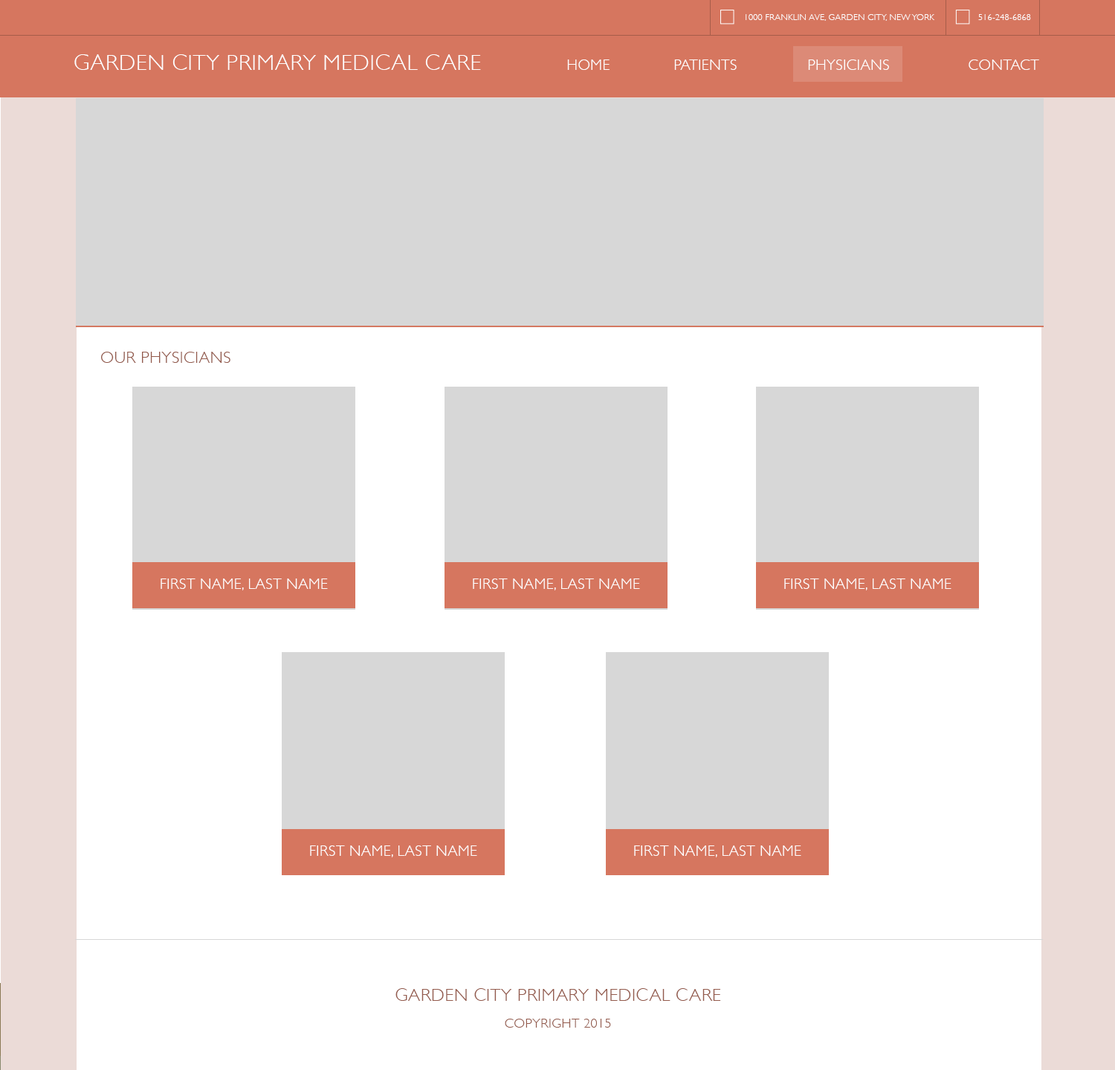
<style>
.page{position:relative;width:1115px;height:1070px;background:#ffffff}
.page>*{position:absolute;margin:0}
.t1{font:8.9px "GillSans-Light";letter-spacing:0.025em;color:#ffffff;text-transform:uppercase}
.t2{font:22.3px "GillSans-Light";letter-spacing:0.025em;color:#ffffff;text-transform:uppercase}
.t3{font:14.9px "GillSans-Light";letter-spacing:0.025em;color:#ffffff;text-transform:uppercase}
.t4{font:16.4px "GillSans-Light";letter-spacing:0.025em;color:#945b4d;text-transform:uppercase}
.t5{font:17.8px/26.8px "GillSans-Light";letter-spacing:0.025em;color:#945b4d;text-transform:uppercase}
.t6{font:13.4px/26.8px "GillSans-Light";letter-spacing:0.025em;color:#945b4d;text-transform:uppercase}
</style>
<div class="page">
<p class="t1" style="left:745px;top:14px;width:189px;height:7px">1000 Franklin Ave, Garden City, NEw yORK</p>
<p class="t1" style="left:978px;top:14px;width:53px;height:6px">516-248-6868</p>
<p class="t2" style="left:74px;top:54px;width:407px;height:16px">Garden City Primary mEDICAL cARE</p>
<p class="t3" style="left:567px;top:59px;width:472px;height:11px">Home    Patients    Physicians    Contact</p>
<p class="t4" style="left:101px;top:352px;width:129px;height:11px">Our Physicians</p>
<p class="t3" style="left:161px;top:578px;width:167px;height:12px">First Name, Last Name</p>
<p class="t3" style="left:473px;top:578px;width:167px;height:12px">First Name, Last Name</p>
<p class="t3" style="left:784px;top:578px;width:167px;height:12px">First Name, Last Name</p>
<p class="t3" style="left:310px;top:845px;width:167px;height:12px">First Name, Last Name</p>
<p class="t3" style="left:634px;top:845px;width:167px;height:12px">First Name, Last Name</p>
<p class="t5" style="left:395px;top:988px;width:326px;height:39px;text-align:center">Garden City Primary Medical Care<br><span class="t6">Copyright 2015</span></p>
</div>
